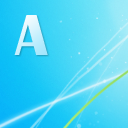
<style>
.page{position:relative;width:128px;height:128px}
.page>*{position:absolute;margin:0}
.t1{font:60px "BritannicBold"}
</style>
<div class="page">
<p class="t1" style="left:14px;top:15px;width:34px;height:40px">A</p>
</div>
